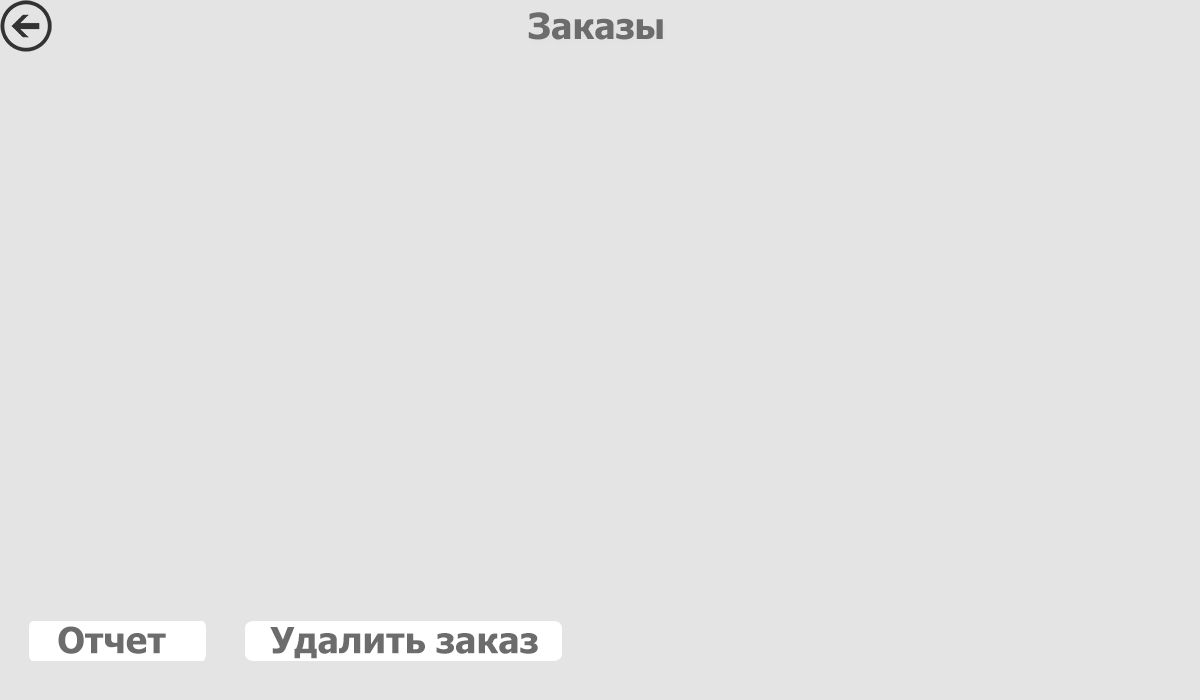
<style>
.page{position:relative;width:1200px;height:700px;background:#e5e4e4}
.page>*{position:absolute;margin:0}
.t1{font:36px "Tahoma-Bold";color:#6c6c6c}
</style>
<div class="page">
<p class="t1" style="left:528px;top:12px;width:135px;height:28px">Заказы</p>
<p class="t1" style="left:58px;top:626px;width:108px;height:28px">Отчет</p>
<p class="t1" style="left:270px;top:627px;width:268px;height:32px">Удалить заказ</p>
</div>
